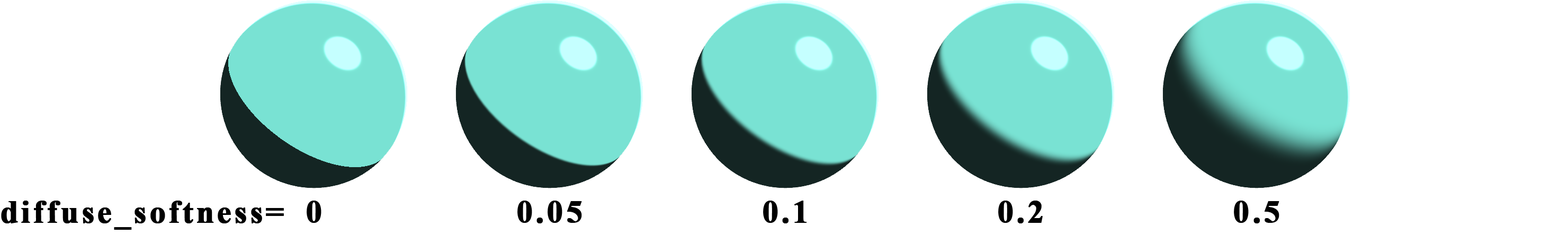
<style>
.page{position:relative;width:1568px;height:234px;background:#ffffff}
.page>*{position:absolute;margin:0}
.t1{font:31.8px "TimesNewRomanPS-BoldMT";letter-spacing:0.075em;color:#000000;font-weight:bold}
</style>
<div class="page">
<p class="t1" style="left:1px;top:200px;width:283px;height:29px">diffuse_softness=</p>
<p class="t1" style="left:307px;top:200px;width:14px;height:22px">0</p>
<p class="t1" style="left:517px;top:200px;width:65px;height:23px">0.05</p>
<p class="t1" style="left:763px;top:200px;width:44px;height:23px">0.1</p>
<p class="t1" style="left:998px;top:200px;width:45px;height:23px">0.2</p>
<p class="t1" style="left:1234px;top:200px;width:45px;height:23px">0.5</p>
</div>
